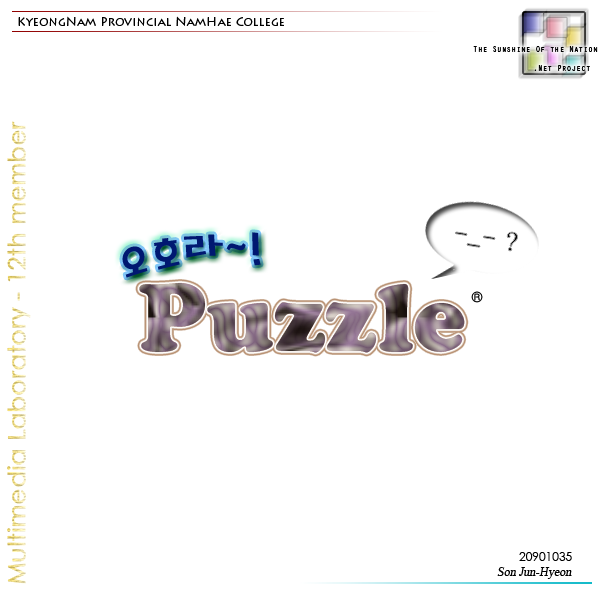
<style>
.page{position:relative;width:600px;height:600px;background:#ffffff}
.page>*{position:absolute;margin:0}
.t1{font:12px "LithosPro-Regular";color:#000000}
.t2{font:8px "OratorStd";color:#000000}
.t3{font:48px "MagicR-HM";color:#001871}
.t4{font:24px "Batang";font-weight:bold}
.t5{font:95px "CooperBlackStd"}
.t6{font:14px "GulimChe";color:#000000}
.t7{font:12px "CenturyGothic";color:#000000}
.t8{font:12px "TimesNewRomanPSMT";color:#000000;font-style:italic}
</style>
<div class="page">
<p class="t1" style="left:18px;top:16px;width:266px;height:10px">KyeongNam Provincial NamHae College</p>
<p class="t2" style="left:473px;top:46px;width:125px;height:25px">The Sunshine Of the Nation<br><br>      .Net Project</p>
<p class="t3" style="left:122px;top:232px;width:139px;height:46px;rotate:-8deg">오호라~!</p>
<p class="t4" style="left:455px;top:232px;width:63px;height:19px;rotate:9deg">-_- ?</p>
<p class="t5" style="left:139px;top:283px;width:326px;height:70px">Puzzle</p>
<p class="t6" style="left:471px;top:291px;width:12px;height:12px">®</p>
<p class="t7" style="left:519px;top:552px;width:53px;height:9px">20901035</p>
<p class="t8" style="left:497px;top:567px;width:75px;height:12px">Son Jun-Hyeon</p>
</div>
